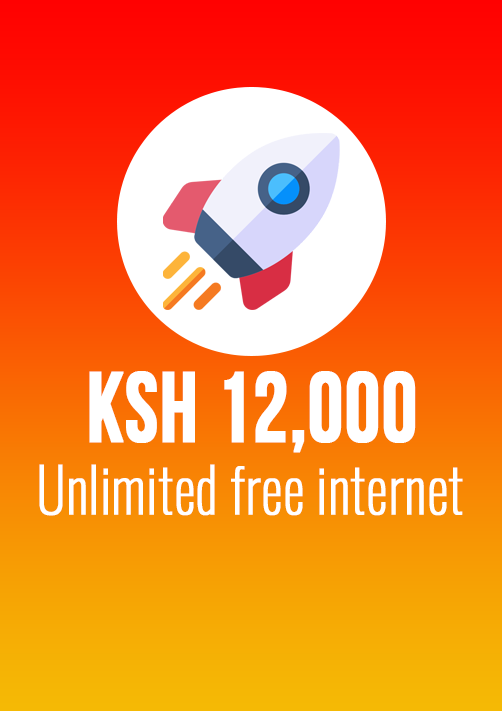
<style>
.page{position:relative;width:502px;height:711px}
.page>*{position:absolute;margin:0}
.t1{font:99.4px "BebasNeueBold";color:#ffffff;font-weight:bold;scale:0.88 1}
.t2{font:61.1px "Oswald-ExtraLight";color:#ffffff;font-weight:bold;scale:0.88 1}
</style>
<div class="page">
<p class="t1" style="left:89px;top:371px;width:327px;height:82px">KSH 12,000</p>
<p class="t2" style="left:39px;top:464px;width:424px;height:52px">Unlimited free internet</p>
</div>
